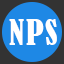
<style>
.page{position:relative;width:64px;height:64px;background:#1e88e5}
.page>*{position:absolute;margin:0}
.t1{font:33.3px "BernardMT-Condensed";letter-spacing:0.04em;color:#ffffff}
</style>
<div class="page">
<p class="t1" style="left:9px;top:19px;width:48px;height:26px">NPS</p>
</div>
